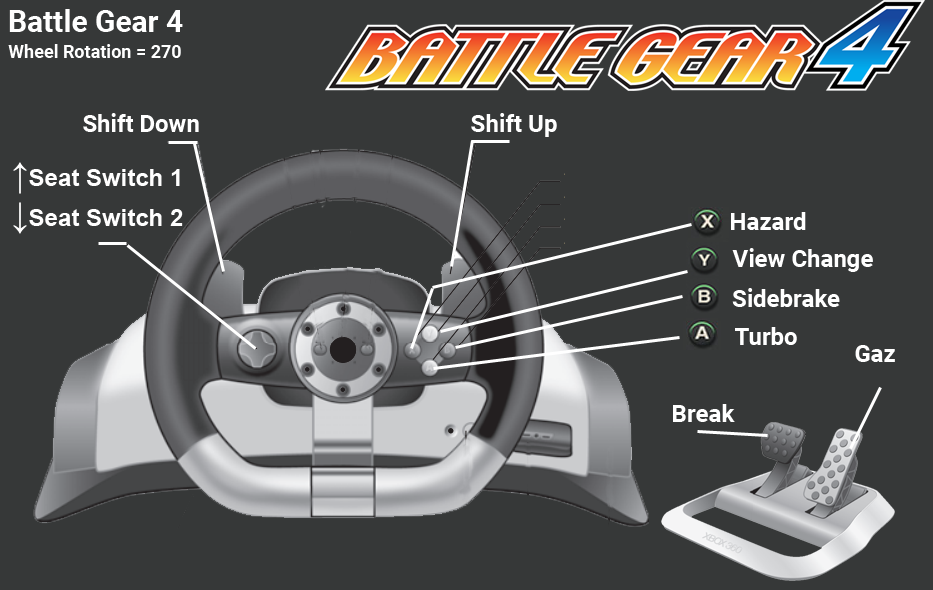
<style>
.page{position:relative;width:933px;height:590px;background:#363838}
.page>*{position:absolute;margin:0}
.t1{font:30px "Roboto-Bold";color:#ffffff}
.t2{font:18px "Roboto-Bold";color:#ffffff}
.t3{font:24px "Roboto-Bold";color:#ffffff}
.t4{font:24px "Arial-BoldMT";color:#ffffff}
.t5{font:36px "Arial-BoldMT";color:#ffffff}
</style>
<div class="page">
<p class="t1" style="left:9px;top:9px;width:174px;height:23px">Battle Gear 4</p>
<p class="t2" style="left:8px;top:44px;width:173px;height:14px">Wheel Rotation = 270</p>
<p class="t3" style="left:83px;top:113px;width:116px;height:19px">Shift Down</p>
<p class="t3" style="left:471px;top:113px;width:86px;height:24px">Shift Up</p>
<p class="t4" style="left:13px;top:162px;width:167px;height:32px"><span class="t5">↑</span>Seat Switch 1</p>
<p class="t4" style="left:13px;top:202px;width:170px;height:32px"><span class="t5">↓</span>Seat Switch 2</p>
<p class="t3" style="left:731px;top:212px;width:75px;height:18px">Hazard</p>
<p class="t3" style="left:732px;top:248px;width:141px;height:24px">View Change</p>
<p class="t3" style="left:732px;top:288px;width:108px;height:19px">Sidebrake</p>
<p class="t3" style="left:735px;top:327px;width:62px;height:18px">Turbo</p>
<p class="t3" style="left:855px;top:345px;width:40px;height:17px">Gaz</p>
<p class="t3" style="left:673px;top:404px;width:62px;height:18px">Break</p>
</div>
